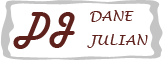
<style>
.page{position:relative;width:163px;height:60px;background:#ffffff}
.page>*{position:absolute;margin:0}
.t1{font:35.3px "HarlowSolid";color:#5e211c;text-transform:uppercase}
.t2{font:14.1px/24px "LucidaHandwriting-Italic";color:#5e211c;text-transform:uppercase}
</style>
<div class="page">
<p class="t1" style="left:13px;top:12px;width:62px;height:37px">DJ</p>
<p class="t2" style="left:87px;top:10px;width:61px;height:38px">Dane <br>Julian</p>
</div>
